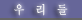
<style>
.page{position:relative;width:82px;height:20px;background:#666699}
.page>*{position:absolute;margin:0}
.t1{font:12px "BatangChe";color:#ffffff;scale:0.9 1}
</style>
<div class="page">
<p class="t1" style="left:14px;top:3px;width:54px;height:13px">우  리  들</p>
</div>
